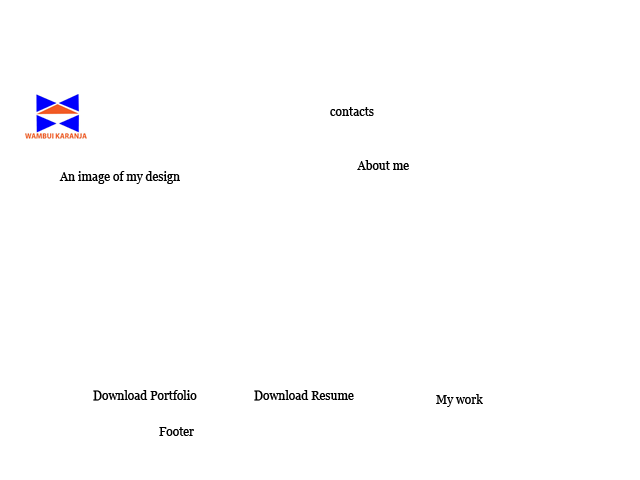
<style>
.page{position:relative;width:640px;height:480px;background:#ffffff}
.page>*{position:absolute;margin:0}
.t1{font:12px "Georgia";color:#000000}
</style>
<div class="page">
<p class="t1" style="left:330px;top:107px;width:44px;height:9px">contacts</p>
<p class="t1" style="left:357px;top:160px;width:52px;height:10px">About me</p>
<p class="t1" style="left:59px;top:171px;width:121px;height:13px">An image of my design</p>
<p class="t1" style="left:93px;top:390px;width:104px;height:11px">Download Portfolio</p>
<p class="t1" style="left:254px;top:390px;width:100px;height:11px">Download Resume</p>
<p class="t1" style="left:436px;top:394px;width:47px;height:13px">My work</p>
<p class="t1" style="left:159px;top:427px;width:35px;height:9px">Footer</p>
</div>
